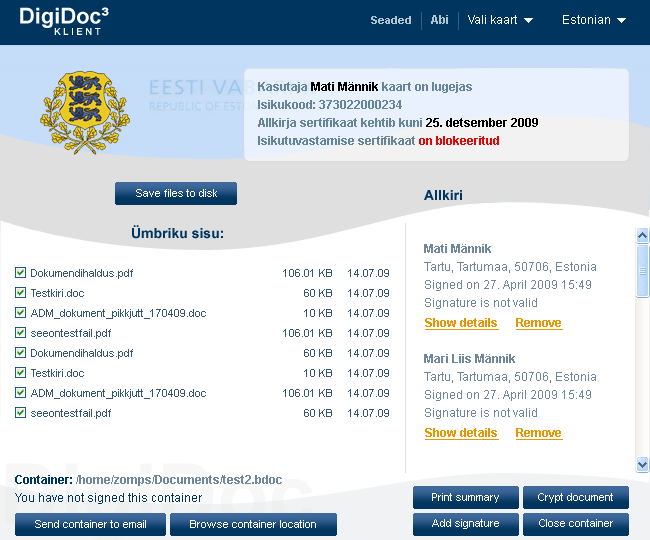
<style>
.page{position:relative;width:650px;height:540px;background:#ffffff}
.page>*{position:absolute;margin:0}
.t1{font:11px "Arial-BoldMT";color:#afc6d1}
.t2{font:12px "Arial-BoldMT";color:#afc6d1}
.t3{font:12px "ArialMT";color:#ffffff}
.t4{font:12px/18px "Arial-BoldMT";color:#668696}
.t5{font:12px/18px "Arial-BoldMT";color:#000000}
.t6{font:12px/18px "Arial-BoldMT";color:#e80303}
.t7{font:11px "ArialMT";color:#ffffff}
.t8{font:14px "Arial-BoldMT";color:#00355f}
.t9{font:12px/18px "ArialMT";color:#71889b}
.t10{font:12px/18px "Arial-BoldMT";color:#71889b}
.t11{font:11px/20px "ArialMT";color:#355670}
.t12{font:12px "Arial-BoldMT";color:#e99401;text-decoration:underline}
.t13{font:12px/18px "ArialMT";color:#00355f}
.t14{font:12px/18px "Arial-BoldMT";color:#00355f}
</style>
<div class="page">
<p class="t1" style="left:371px;top:16px;width:40px;height:8px">Seaded</p>
<p class="t2" style="left:431px;top:15px;width:17px;height:9px">Abi</p>
<p class="t3" style="left:468px;top:15px;width:49px;height:9px">Vali kaart</p>
<p class="t3" style="left:563px;top:15px;width:47px;height:9px">Estonian</p>
<p class="t4" style="left:258px;top:82px;width:280px;height:63px">Kasutaja <span class="t5">Mati Männik</span> kaart on lugejas<br>Isikukood: 373022000234<br>Allkirja sertifikaat kehtib kuni <span class="t5">25. detsember 2009<br></span>Isikutuvastamise sertifikaat <span class="t6">on blokeeritud</span></p>
<p class="t7" style="left:136px;top:189px;width:81px;height:8px">Save files to disk</p>
<p class="t8" style="left:424px;top:190px;width:38px;height:10px">Allkiri</p>
<p class="t8" style="left:132px;top:225px;width:91px;height:14px">Ümbriku sisu:</p>
<p class="t9" style="left:424px;top:244px;width:172px;height:65px"><span class="t10">Mati Männik<br></span>Tartu, Tartumaa, 50706, Estonia<br>Signed on 27. April 2009 15:49<br>Signature is not valid</p>
<p class="t11" style="left:31px;top:269px;width:175px;height:150px">Dokumendihaldus.pdf<br>Testkiri.doc<br>ADM_dokument_pikkjutt_170409.doc<br>seeontestfail.pdf<br>Dokumendihaldus.pdf<br>Testkiri.doc<br>ADM_dokument_pikkjutt_170409.doc<br>seeontestfail.pdf</p>
<p class="t11" style="left:283px;top:269px;width:49px;height:148px;text-align:right">106.01 KB<br>60 KB<br>10 KB<br>106.01 KB<br>60 KB<br>10 KB<br>106.01 KB<br>60 KB</p>
<p class="t11" style="left:348px;top:269px;width:41px;height:148px;text-align:right">14.07.09<br>14.07.09<br>14.07.09<br>14.07.09<br>14.07.09<br>14.07.09<br>14.07.09<br>14.07.09</p>
<p class="t12" style="left:425px;top:318px;width:138px;height:12px">Show details      Remove</p>
<p class="t9" style="left:424px;top:354px;width:172px;height:65px"><span class="t10">Mari Liis Männik<br></span>Tartu, Tartumaa, 50706, Estonia<br>Signed on 27. April 2009 15:49<br>Signature is not valid</p>
<p class="t12" style="left:425px;top:428px;width:138px;height:12px">Show details      Remove</p>
<p class="t13" style="left:15px;top:475px;width:267px;height:29px"><span class="t14">Container: </span><span class="t10">/home/zomps/Documents/test2.bdoc<br></span>You have not signed this container</p>
<p class="t7" style="left:432px;top:493px;width:67px;height:10px">Print summary</p>
<p class="t7" style="left:538px;top:493px;width:75px;height:10px">Crypt document</p>
<p class="t7" style="left:35px;top:520px;width:111px;height:8px">Send container to email</p>
<p class="t7" style="left:190px;top:520px;width:126px;height:8px">Browse container location</p>
<p class="t7" style="left:432px;top:519px;width:67px;height:10px">Add signature</p>
<p class="t7" style="left:539px;top:519px;width:74px;height:8px">Close container</p>
</div>
